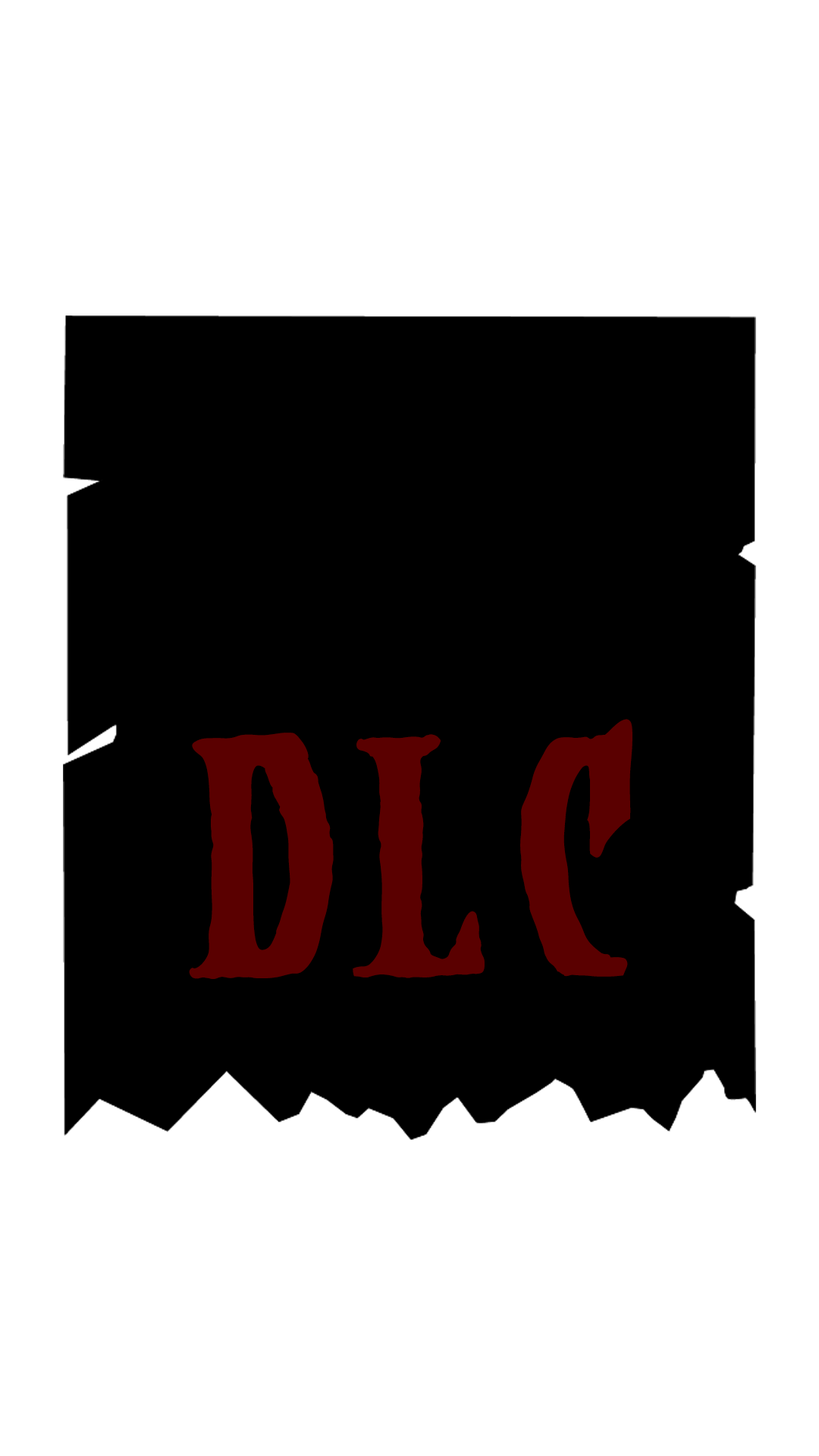
<style>
.page{position:relative;width:819px;height:1456px;background:#ffffff}
.page>*{position:absolute;margin:0}
.t1{font:412.3px "DwarvenAxeBBW00-Regular";letter-spacing:0.1em;color:#5a0000;scale:0.8 1}
</style>
<div class="page">
<p class="t1" style="left:189px;top:719px;width:443px;height:260px">DLC</p>
</div>
